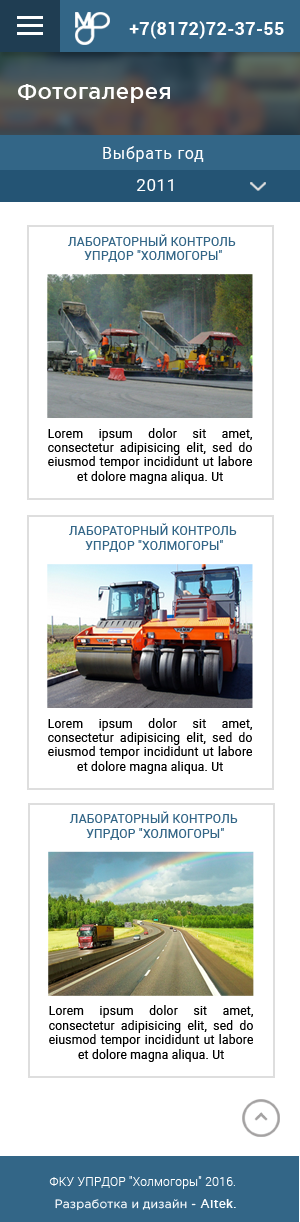
<style>
.page{position:relative;width:300px;height:1222px;background:#ffffff}
.page>*{position:absolute;margin:0}
.t1{font:18px "Roboto-Bold";letter-spacing:0.02em;color:#ffffff}
.t2{font:22px "GothamPro-Medium";letter-spacing:0.02em;color:#ffffff}
.t3{font:16px "Roboto-Regular";letter-spacing:0.05em;color:#ffffff}
.t4{font:16px "Roboto-Regular";letter-spacing:0.05em;color:#ffffff;scale:1.03 1}
.t5{font:12px "Roboto-Regular";letter-spacing:0.02em;color:#336687;text-transform:uppercase}
.t6{font:12px "Roboto-Regular";letter-spacing:0.02em;color:#000000}
.t7{font:12px "Roboto-Light";letter-spacing:0.02em;color:#ffffff}
.t8{font:12px "Roboto-Light";letter-spacing:0.02em;color:#fbfdff}
.t9{font:12px "GothamPro";letter-spacing:0.02em;color:#fbfdff}
.t10{font:12px "GothamPro-Medium";letter-spacing:0.02em;color:#fbfdff}
</style>
<div class="page">
<p class="t1" style="left:129px;top:21px;width:155px;height:18px">+7(8172)72-37-55</p>
<p class="t2" style="left:18px;top:84px;width:152px;height:19px">Фотогалерея</p>
<p class="t3" style="left:103px;top:146px;width:101px;height:16px">Выбрать год</p>
<p class="t4" style="left:137px;top:179px;width:36px;height:12px">2011</p>
<p class="t5" style="left:68px;top:234px;width:168px;height:28px;text-align:center">Лабораторный контроль <br>Упрдор "Холмогоры"</p>
<p class="t6" style="left:48px;top:428px;width:204px;height:56px;text-align:justify">Lorem ipsum dolor sit amet, consectetur adipisicing elit, sed do eiusmod tempor incididunt ut labore et dolore magna aliqua. Ut</p>
<p class="t5" style="left:69px;top:523px;width:168px;height:29px;text-align:center">Лабораторный контроль <br>Упрдор "Холмогоры"</p>
<p class="t6" style="left:48px;top:718px;width:204px;height:56px;text-align:justify">Lorem ipsum dolor sit amet, consectetur adipisicing elit, sed do eiusmod tempor incididunt ut labore et dolore magna aliqua. Ut</p>
<p class="t5" style="left:69px;top:811px;width:169px;height:29px;text-align:center">Лабораторный контроль <br>Упрдор "Холмогоры"</p>
<p class="t6" style="left:49px;top:1005px;width:204px;height:57px;text-align:justify">Lorem ipsum dolor sit amet, consectetur adipisicing elit, sed do eiusmod tempor incididunt ut labore et dolore magna aliqua. Ut</p>
<p class="t7" style="left:49px;top:1176px;width:186px;height:13px">ФКУ УПРДОР "Холмогоры"<span class="t8"> 2016.</span></p>
<p class="t9" style="left:55px;top:1199px;width:181px;height:12px">Разработка и дизайн - <span class="t10">Aitek.</span></p>
</div>
